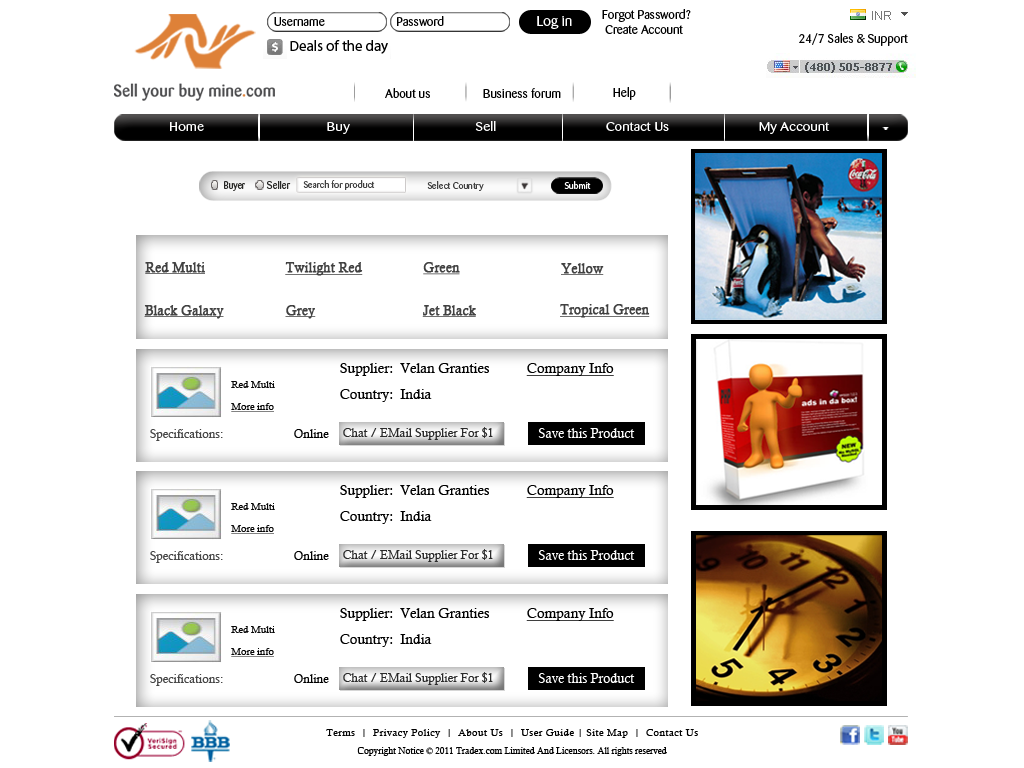
<style>
.page{position:relative;width:1024px;height:768px;background:#ffffff}
.page>*{position:absolute;margin:0}
.t1{font:12px "Barmeno-Regular";color:#000000;scale:1.05 1}
.t2{font:14px "Barmeno-Regular";color:#ffffff;scale:1.05 1}
.t3{font:14.9px "MyriadPro-Regular";color:#000000}
.t4{font:12px "Barmeno-Regular";color:#030303;scale:1.05 1}
.t5{font:12.1px "Barmeno-Regular";color:#ffffff;scale:1.2 1}
.t6{font:10.4px "Barmeno-Regular";color:#282826;scale:0.87 1}
.t7{font:10.4px "Barmeno-Regular";color:#282826}
.t8{font:9.5px "Barmeno-Regular";color:#414141}
.t9{font:10px "MyriadPro-Regular";color:#ffffff;scale:0.87 1}
.t10{font:13px "CalistoMT";color:#414141;font-weight:bold;text-decoration:underline}
.t11{font:14px/13px "CalistoMT";color:#000000}
.t12{font:14px/13px "CalistoMT";color:#000000;text-decoration:underline}
.t13{font:10px/22px "CalistoMT";color:#060606}
.t14{font:10px/22px "CalistoMT";color:#060606;text-decoration:underline}
.t15{font:12px "CalistoMT";color:#454545}
.t16{font:12px "CalistoMT";color:#000000}
.t17{font:12px "CalistoMT";color:#2a2a2a}
.t18{font:13px "CalistoMT";color:#ffffff}
.t19{font:10px/18px "CalistoMT";letter-spacing:0.045em;color:#000000}
.t20{font:9px/18px "CalistoMT";color:#000000}
</style>
<div class="page">
<p class="t1" style="left:274px;top:17px;width:51px;height:9px">Username</p>
<p class="t1" style="left:397px;top:16px;width:47px;height:10px">Password</p>
<p class="t2" style="left:537px;top:16px;width:35px;height:13px">Log in</p>
<p class="t1" style="left:602px;top:9px;width:89px;height:25px">Forgot Password? <br> Create Account</p>
<p class="t3" style="left:290px;top:40px;width:98px;height:14px">Deals of the day</p>
<p class="t4" style="left:799px;top:33px;width:109px;height:13px">24/7 Sales &amp; Support</p>
<p class="t1" style="left:385px;top:88px;width:45px;height:10px">About us</p>
<p class="t1" style="left:483px;top:88px;width:78px;height:10px">Business forum</p>
<p class="t1" style="left:613px;top:87px;width:23px;height:13px">Help</p>
<p class="t5" style="left:170px;top:121px;width:660px;height:13px">Home                                     Buy                                      Sell                                 Contact Us                           My Account</p>
<p class="t6" style="left:224px;top:181px;width:21px;height:10px">Buyer</p>
<p class="t7" style="left:266px;top:181px;width:25px;height:8px">Seller</p>
<p class="t8" style="left:303px;top:180px;width:72px;height:10px">Search for product</p>
<p class="t8" style="left:427px;top:181px;width:57px;height:10px">Select Country</p>
<p class="t9" style="left:564px;top:181px;width:27px;height:8px">Submit</p>
<p class="t10" style="left:145px;top:262px;width:60px;height:12px">Red Multi</p>
<p class="t10" style="left:285px;top:262px;width:78px;height:14px">Twilight Red</p>
<p class="t10" style="left:423px;top:262px;width:37px;height:13px">Green</p>
<p class="t10" style="left:561px;top:263px;width:43px;height:12px">Yellow</p>
<p class="t10" style="left:144px;top:305px;width:80px;height:14px">Black Galaxy</p>
<p class="t10" style="left:285px;top:305px;width:31px;height:14px">Grey</p>
<p class="t10" style="left:422px;top:305px;width:54px;height:12px">Jet Black</p>
<p class="t10" style="left:560px;top:304px;width:90px;height:14px">Tropical Green</p>
<p class="t11" style="left:340px;top:363px;width:274px;height:39px">Supplier:  Velan Granties    <span class="t12">Company Info<br></span><br>Country:  India</p>
<p class="t13" style="left:231px;top:381px;width:44px;height:31px">Red Multi<br><span class="t14">More info</span></p>
<p class="t15" style="left:150px;top:429px;width:73px;height:12px">Specifications:</p>
<p class="t16" style="left:294px;top:429px;width:35px;height:9px">Online</p>
<p class="t17" style="left:343px;top:427px;width:150px;height:13px">Chat / EMail Supplier For $1</p>
<p class="t18" style="left:538px;top:428px;width:97px;height:10px">Save this Product</p>
<p class="t11" style="left:340px;top:485px;width:274px;height:39px">Supplier:  Velan Granties          <span class="t12">Company Info<br></span><br>Country:  India</p>
<p class="t13" style="left:231px;top:503px;width:44px;height:31px">Red Multi<br><span class="t14">More info</span></p>
<p class="t15" style="left:150px;top:551px;width:73px;height:12px">Specifications:</p>
<p class="t16" style="left:294px;top:551px;width:35px;height:9px">Online</p>
<p class="t17" style="left:343px;top:549px;width:150px;height:13px">Chat / EMail Supplier For $1</p>
<p class="t18" style="left:538px;top:550px;width:97px;height:10px">Save this Product</p>
<p class="t11" style="left:340px;top:608px;width:274px;height:39px">Supplier:  Velan Granties    <span class="t12">Company Info<br></span><br>Country:  India</p>
<p class="t13" style="left:231px;top:626px;width:44px;height:31px">Red Multi<br><span class="t14">More info</span></p>
<p class="t15" style="left:150px;top:674px;width:73px;height:12px">Specifications:</p>
<p class="t16" style="left:294px;top:674px;width:35px;height:9px">Online</p>
<p class="t17" style="left:343px;top:672px;width:150px;height:13px">Chat / EMail Supplier For $1</p>
<p class="t18" style="left:538px;top:673px;width:97px;height:10px">Save this Product</p>
<p class="t19" style="left:326px;top:729px;width:372px;height:27px;text-align:center">Terms  |  Privacy Policy  |  About Us  |  User Guide | Site Map  |  Contact Us<br><span class="t20">Copyright Notice © 2011 Tradex.com Limited And Licensors. All rights reserved</span></p>
</div>
